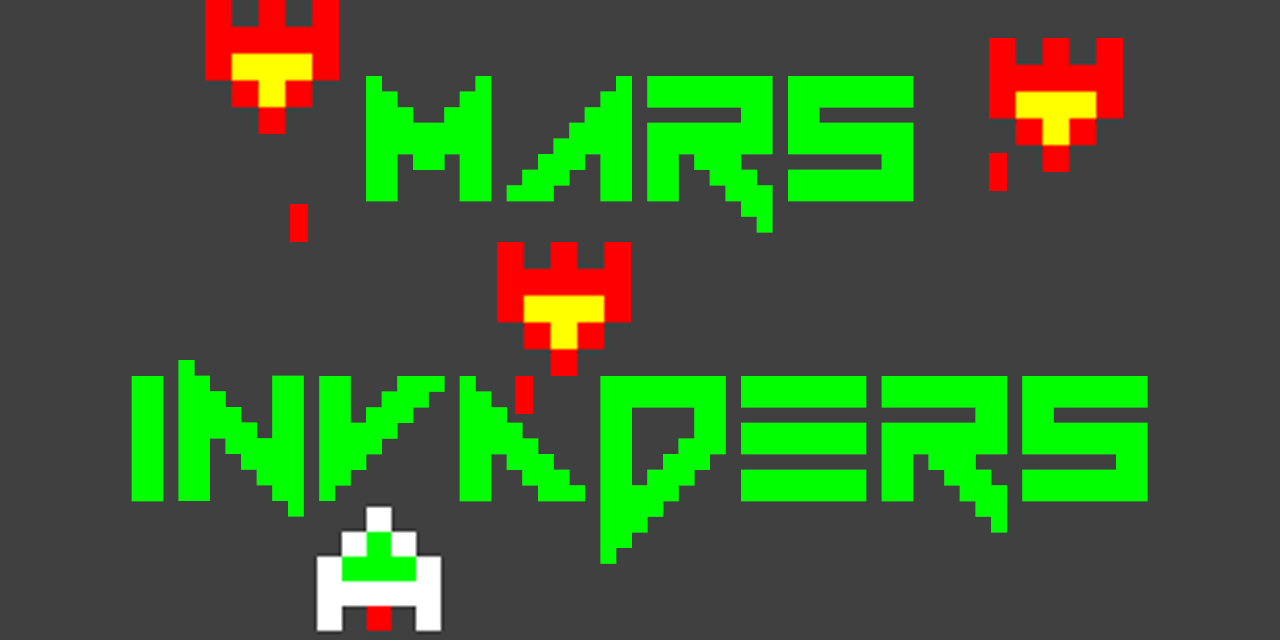
<style>
.page{position:relative;width:1280px;height:640px;background:#404040}
.page>*{position:absolute;margin:0}
.t1{font:250px "Vermin-Vibes-1989";color:#00ff00}
</style>
<div class="page">
<p class="t1" style="left:131px;top:76px;width:1017px;height:488px;text-align:center">MARs<br>Invaders</p>
</div>
